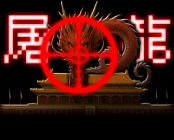
<style>
.page{position:relative;width:174px;height:140px;background:#000000}
.page>*{position:absolute;margin:0}
.t1{font:56.4px "HYPixel-11px-U"}
</style>
<div class="page">
<p class="t1" style="left:4px;top:15px;width:167px;height:49px">屠  龍</p>
</div>
